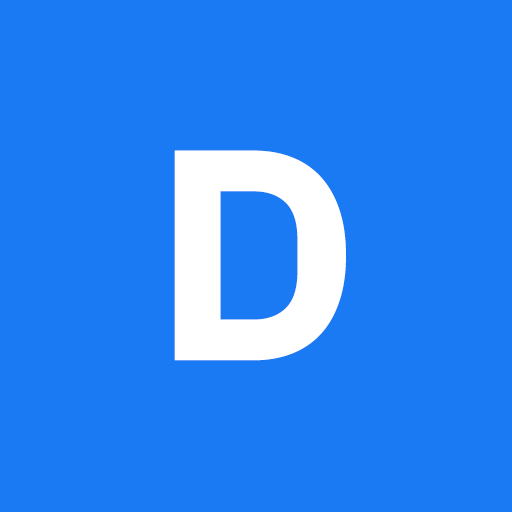
<style>
.page{position:relative;width:512px;height:512px;background:#197af4}
.page>*{position:absolute;margin:0}
.t1{font:300px "IBMPlexSans-Bold";color:#ffffff}
</style>
<div class="page">
<p class="t1" style="left:174px;top:150px;width:172px;height:211px">D</p>
</div>
